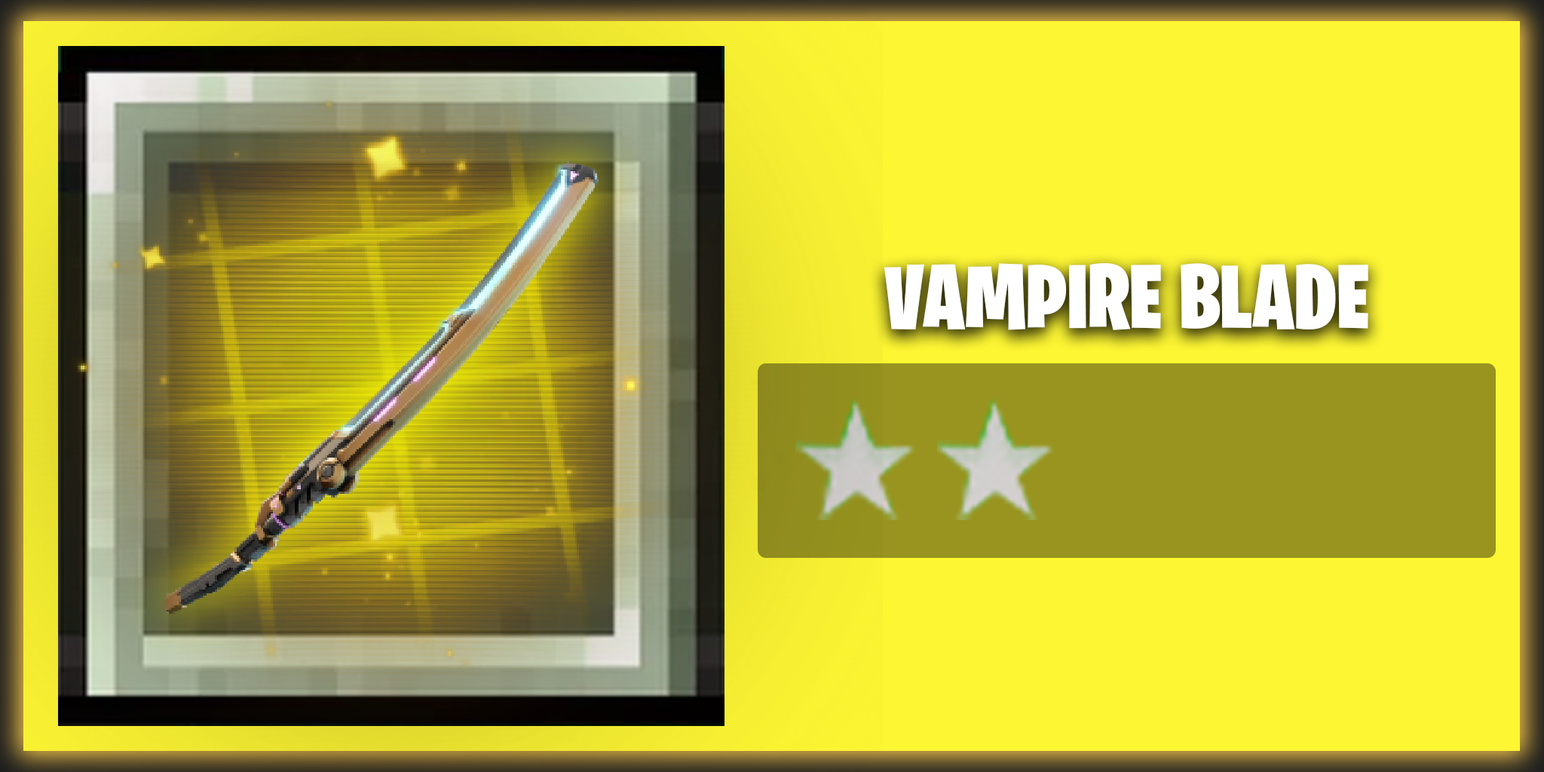
<style>
.page{position:relative;width:1544px;height:772px;background:#fdf633}
.page>*{position:absolute;margin:0}
.t1{font:90.5px "BurbankBigCondensed-Black";color:#ffffff}
</style>
<div class="page">
<p class="t1" style="left:885px;top:263px;width:484px;height:67px">VAMPIRE BLADE</p>
</div>
